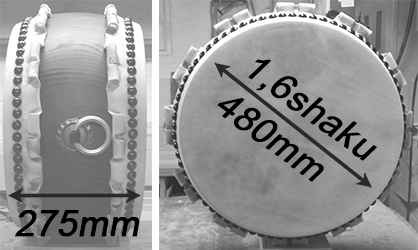
<style>
.page{position:relative;width:418px;height:250px}
.page>*{position:absolute;margin:0}
.t1{font:36px/47px "ArialMT";color:#000000;font-weight:bold;font-style:italic}
.t2{font:36px "ArialMT";color:#000000;font-weight:bold;font-style:italic}
</style>
<div class="page">
<p class="t1" style="left:217px;top:59px;width:160px;height:123px;rotate:36deg">1,6shaku<br>480mm</p>
<p class="t2" style="left:15px;top:210px;width:125px;height:27px">275mm</p>
</div>
